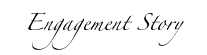
<style>
.page{position:relative;width:207px;height:55px;background:#ffffff}
.page>*{position:absolute;margin:0}
.t1{font:15.3px "Zapfino";color:#000000}
</style>
<div class="page">
<p class="t1" style="left:28px;top:12px;width:156px;height:38px;text-align:center">Engagement Story</p>
</div>
